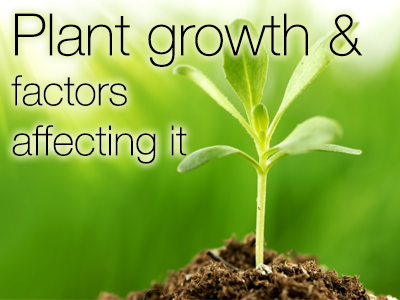
<style>
.page{position:relative;width:400px;height:300px}
.page>*{position:absolute;margin:0}
.t1{font:41.7px "HelveticaNeue-Thin";color:#000000}
.t2{font:58.3px "HelveticaNeue-Thin";color:#000000}
</style>
<div class="page">
<p class="t1" style="left:11px;top:13px;width:352px;height:151px"><span class="t2">Plant growth &amp; </span>factors<br>affecting it</p>
</div>
